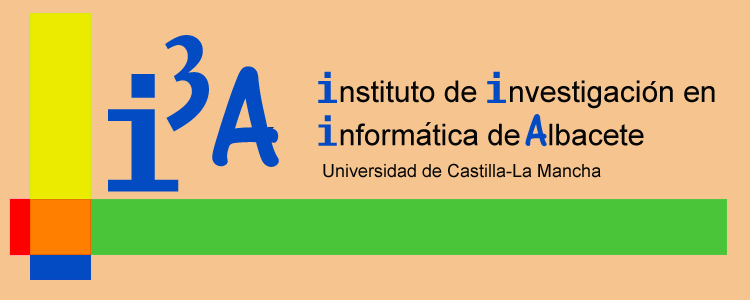
<style>
.page{position:relative;width:750px;height:300px;background:#f6c48f}
.page>*{position:absolute;margin:0}
.t1{font:140px "QuixleyLetPlain";color:#034bc3}
.t2{font:150px "Fixedsys";color:#034bc3}
.t3{font:150px "OneStrokeScriptLetPlain";color:#034bc3}
.t4{font:40px "Fixedsys";color:#034bc3}
.t5{font:30px "ArialMT";color:#060606}
.t6{font:36px "Fixedsys";color:#060606}
.t7{font:39px "Fixedsys";color:#034bc3}
.t8{font:48px "OneStrokeScriptLetPlain";color:#034bc3}
.t9{font:18px "ArialMT";color:#060606}
</style>
<div class="page">
<p class="t1" style="left:165px;top:35px;width:44px;height:97px">3</p>
<p class="t2" style="left:108px;top:74px;width:71px;height:118px">i</p>
<p class="t3" style="left:212px;top:66px;width:67px;height:101px">A</p>
<p class="t4" style="left:318px;top:71px;width:19px;height:32px">i</p>
<p class="t4" style="left:487px;top:71px;width:19px;height:32px">i</p>
<p class="t5" style="left:340px;top:80px;width:375px;height:66px"><span class="t6"> </span>nstituto de  nvestigacion en<br> nformatica de  lbacete</p>
<p class="t7" style="left:318px;top:115px;width:19px;height:31px">i</p>
<p class="t8" style="left:525px;top:114px;width:22px;height:33px">A</p>
<p class="t9" style="left:323px;top:163px;width:278px;height:15px">Universidad de Castilla-La Mancha</p>
</div>
